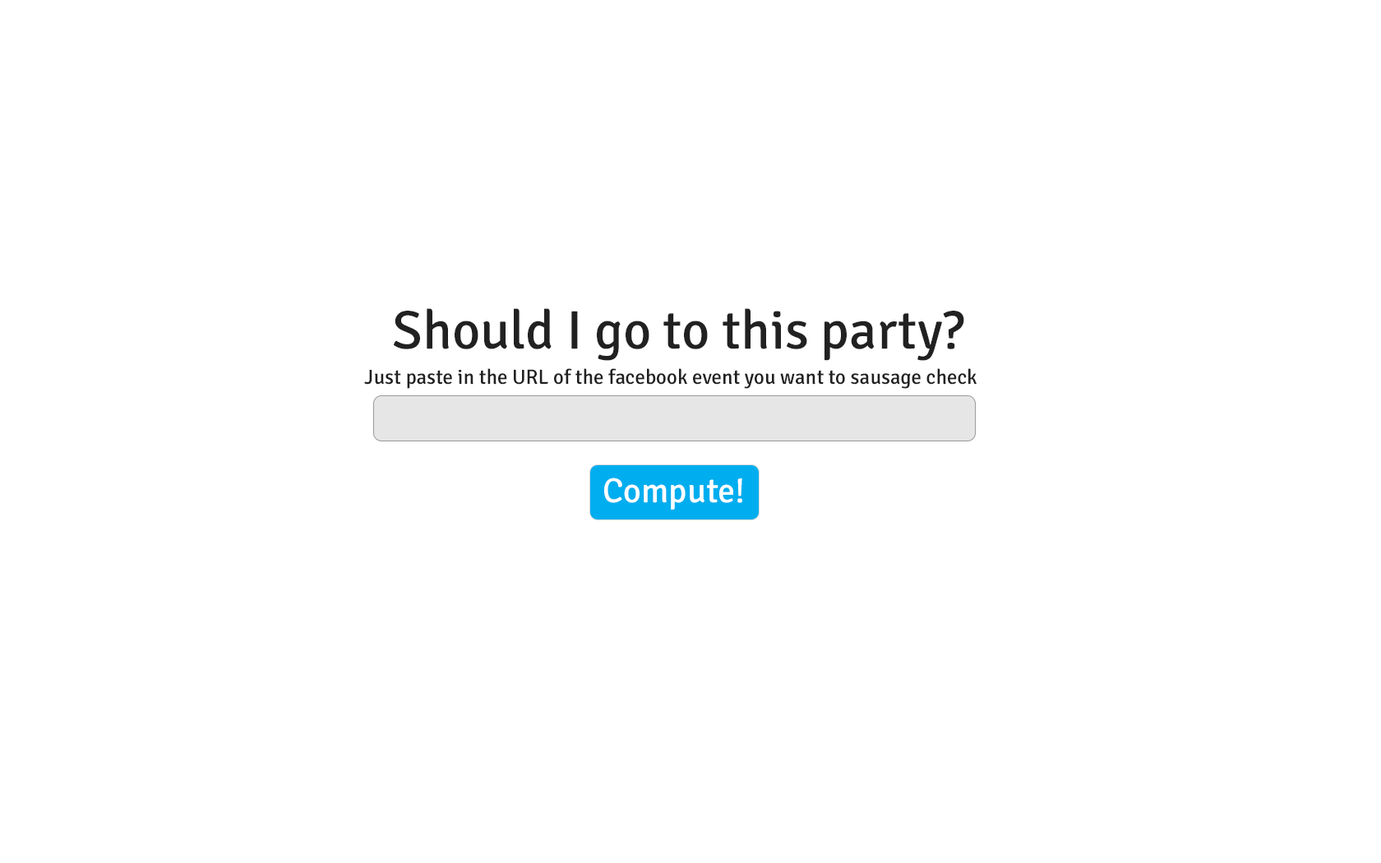
<style>
.page{position:relative;width:1381px;height:863px;background:#ffffff}
.page>*{position:absolute;margin:0}
.t1{font:54.3px "Signika-Regular";color:#212121}
.t2{font:20.6px "Signika-Regular";color:#212121}
.t3{font:34.5px "Signika-Regular";color:#ffffff}
</style>
<div class="page">
<p class="t1" style="left:394px;top:308px;width:570px;height:53px">Should I go to this party?</p>
<p class="t2" style="left:364px;top:368px;width:614px;height:21px">Just paste in the URL of the facebook event you want to sausage check</p>
<p class="t3" style="left:604px;top:478px;width:138px;height:32px">Compute!</p>
</div>
